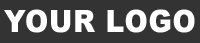
<style>
.page{position:relative;width:200px;height:43px;background:#333333}
.page>*{position:absolute;margin:0}
.t1{font:30.8px "Arial-Black";letter-spacing:0.025em;color:#ffffff;scale:0.91 1}
</style>
<div class="page">
<p class="t1" style="left:4px;top:9px;width:191px;height:24px">YOUR LOGO</p>
</div>
